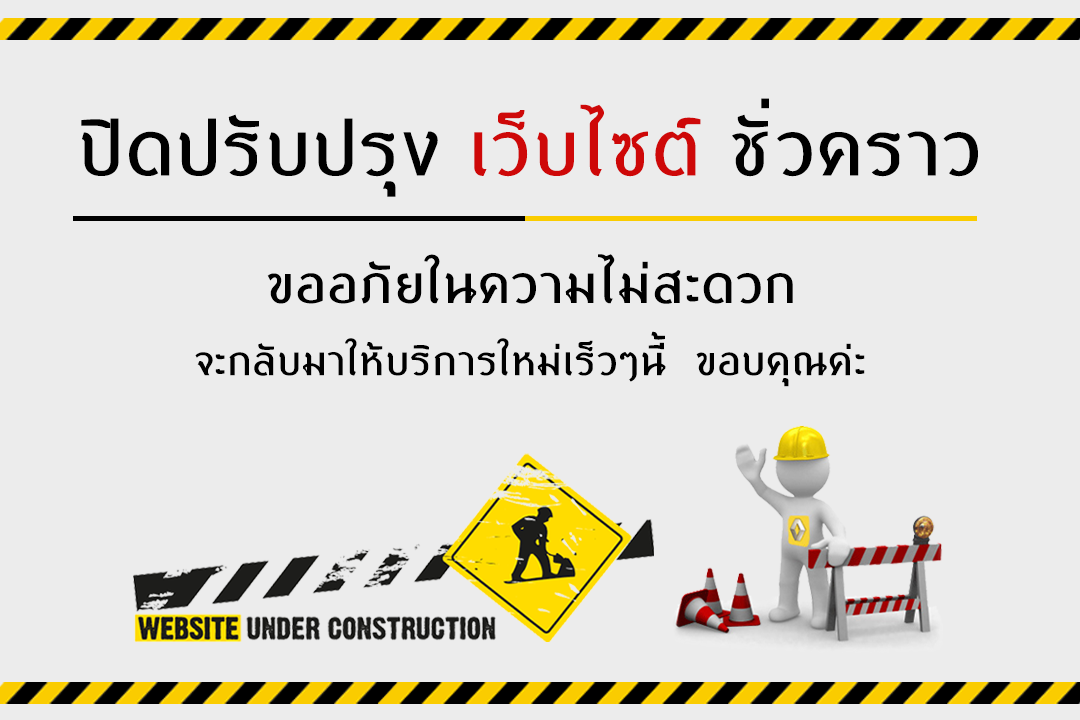
<style>
.page{position:relative;width:1080px;height:720px;background:#ececec}
.page>*{position:absolute;margin:0}
.t1{font:80.3px "BSRUBANSOMDEJ-SemiBold";letter-spacing:0.02em;color:#000000}
.t2{font:80.3px "BSRUBANSOMDEJ-SemiBold";letter-spacing:0.02em;color:#ce0808}
.t3{font:55.3px "BSRUBANSOMDEJ-SemiBold";letter-spacing:0.02em;color:#000000}
.t4{font:42.1px "BSRUBANSOMDEJ-SemiBold";letter-spacing:0.02em;color:#000000}
</style>
<div class="page">
<p class="t1" style="left:81px;top:98px;width:897px;height:99px">ปิดปรับปรุง <span class="t2">เว็บไซต์ </span>ชั่วคราว</p>
<p class="t3" style="left:267px;top:254px;width:526px;height:50px">ขออภัยในความไม่สะดวก</p>
<p class="t4" style="left:195px;top:331px;width:670px;height:56px">จะกลับมาให้บริการใหม่เร็วๆนี้  ขอบคุณค่ะ</p>
</div>
